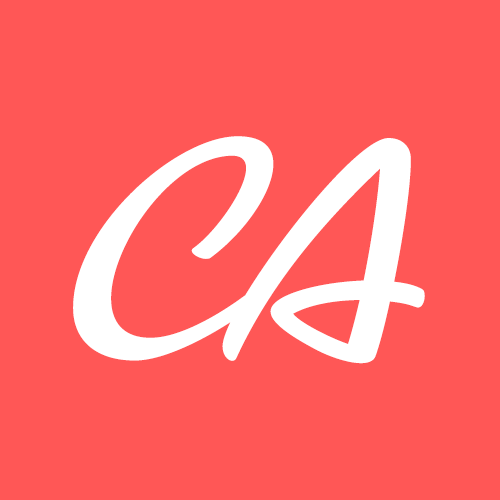
<style>
.page{position:relative;width:500px;height:500px;background:#ff5756}
.page>*{position:absolute;margin:0}
.t1{font:300px "Kinescope";color:#ffffff}
</style>
<div class="page">
<p class="t1" style="left:73px;top:136px;width:352px;height:228px">CA</p>
</div>
